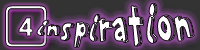
<style>
.page{position:relative;width:200px;height:50px}
.page>*{position:absolute;margin:0}
.t1{font:35px "SegoeKeycaps"}
.t2{font:35px "PFPlayskoolPro-3D";color:#ffffff}
.t3{font:45px "PFPlayskoolPro-3D";color:#ffffff}
</style>
<div class="page">
<p class="t1" style="left:5px;top:5px;width:42px;height:42px">4</p>
<p class="t2" style="left:37px;top:3px;width:158px;height:45px">inspira<span class="t3">tion</span></p>
</div>
